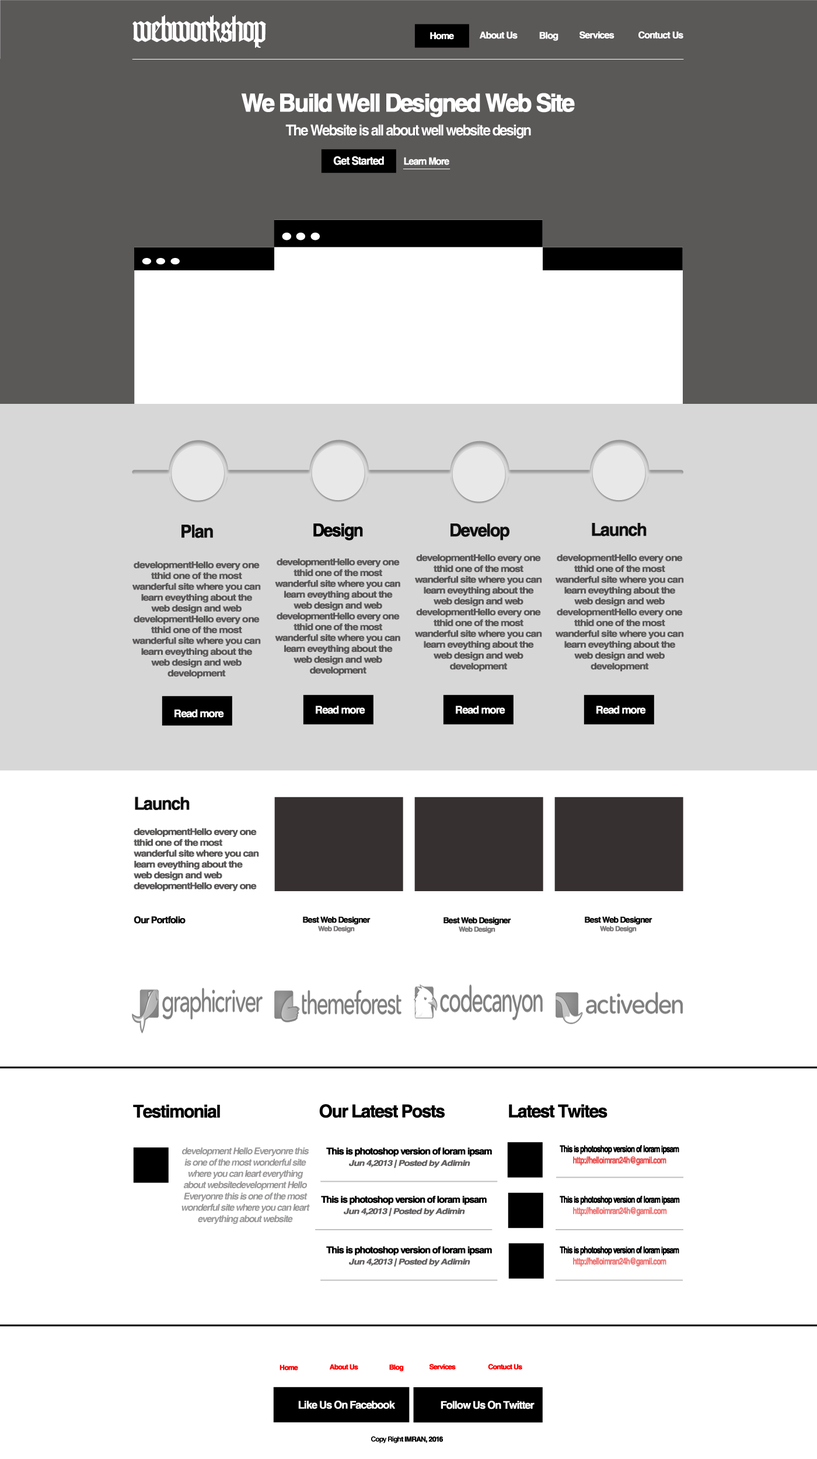
<style>
.page{position:relative;width:817px;height:1459px;background:#ffffff}
.page>*{position:absolute;margin:0}
.t1{font:35.3px "Lohengrin";letter-spacing:-0.08em;color:#ffffff;font-weight:bold}
.t2{font:9.4px "Helvetica-Bold";letter-spacing:-0.08em;color:#ffffff;font-weight:bold}
.t3{font:24.9px "Helvetica-Bold";letter-spacing:-0.08em;color:#ffffff;font-weight:bold;scale:0.94 1}
.t4{font:15px "Helvetica-Bold";letter-spacing:-0.08em;color:#ffffff;scale:0.94 1}
.t5{font:11.2px "Helvetica-Bold";letter-spacing:-0.08em;color:#ffffff;font-weight:bold;scale:0.94 1}
.t6{font:10px "Helvetica-Bold";letter-spacing:-0.08em;color:#ffffff;font-weight:bold;scale:0.94 1}
.t7{font:17.6px "Helvetica-Bold";letter-spacing:-0.08em;color:#111010;font-weight:bold}
.t8{font:17.6px "Helvetica-Bold";letter-spacing:-0.08em;color:#000000;font-weight:bold;scale:0.95 1}
.t9{font:17.6px "Helvetica-Bold";letter-spacing:-0.08em;color:#111010;font-weight:bold;scale:0.96 1}
.t10{font:9px "Helvetica-Bold";letter-spacing:-0.08em;color:#5b5858;font-weight:bold;scale:1.13 1}
.t11{font:9px "Helvetica-Bold";letter-spacing:-0.08em;color:#5b5858;font-weight:bold;scale:1.14 1}
.t12{font:9px "Helvetica-Bold";letter-spacing:-0.08em;color:#5b5858;font-weight:bold;scale:1.11 1}
.t13{font:10.6px "Helvetica-Bold";letter-spacing:-0.08em;color:#ffffff;font-weight:bold}
.t14{font:9.4px "Helvetica-Bold";letter-spacing:-0.08em;color:#111010;font-weight:bold}
.t15{font:8.2px "Helvetica-Bold";letter-spacing:-0.08em;color:#111010;font-weight:bold}
.t16{font:7.1px "Helvetica-Bold";letter-spacing:-0.08em;color:#7d7b7b;font-weight:bold}
.t17{font:17.6px "Helvetica-Bold";letter-spacing:-0.08em;color:#010101;font-weight:bold}
.t18{font:17.6px "Helvetica-Bold";letter-spacing:-0.08em;color:#000000;font-weight:bold}
.t19{font:9.4px "Helvetica-Bold";letter-spacing:-0.08em;color:#000000;font-weight:bold;scale:0.71 1}
.t20{font:9.4px "Helvetica-Bold";letter-spacing:-0.08em;color:#ea5656;font-weight:bold;scale:0.71 1}
.t21{font:9.4px "Helvetica-Bold";letter-spacing:-0.08em;color:#9a9898;font-style:italic}
.t22{font:9.4px "Helvetica-Bold";letter-spacing:-0.08em;color:#000000;font-weight:bold}
.t23{font:7.9px "Helvetica-Bold";letter-spacing:-0.08em;color:#636060;font-weight:bold;font-style:italic;scale:1.18 1}
.t24{font:9.4px "Helvetica-Bold";letter-spacing:-0.08em;color:#000000;font-weight:bold;scale:0.72 1}
.t25{font:9.4px "Helvetica-Bold";letter-spacing:-0.08em;color:#ef7b7b;font-weight:bold;scale:0.72 1}
.t26{font:9.4px "Helvetica-Bold";letter-spacing:-0.08em;color:#ee7a7a;font-weight:bold;scale:0.71 1}
.t27{font:7.1px "Helvetica-Bold";letter-spacing:-0.08em;color:#ff0000;font-weight:bold}
.t28{font:10.6px "Helvetica-Bold";letter-spacing:-0.08em;color:#fefefe;font-weight:bold}
.t29{font:10.6px "Helvetica-Bold";letter-spacing:-0.08em;color:#fffefe;font-weight:bold}
.t30{font:7.1px "Helvetica-Bold";letter-spacing:-0.08em;color:#010101;font-weight:bold}
.t31{font:7.1px "Helvetica-Bold";letter-spacing:-0.08em;color:#010101}
</style>
<div class="page">
<p class="t1" style="left:132px;top:15px;width:134px;height:33px">webworkshop</p>
<p class="t2" style="left:430px;top:32px;width:24px;height:8px">Home</p>
<p class="t2" style="left:479px;top:32px;width:39px;height:7px">About Us</p>
<p class="t2" style="left:539px;top:32px;width:20px;height:9px">Blog</p>
<p class="t2" style="left:580px;top:31px;width:35px;height:8px">Services</p>
<p class="t2" style="left:639px;top:31px;width:45px;height:8px">Contuct Us</p>
<p class="t3" style="left:241px;top:93px;width:334px;height:24px">We Build Well Designed Web Site</p>
<p class="t4" style="left:285px;top:124px;width:246px;height:15px">The Website is all about well website design</p>
<p class="t5" style="left:333px;top:156px;width:51px;height:9px">Get Started</p>
<p class="t6" style="left:404px;top:157px;width:45px;height:8px">Learn More</p>
<p class="t7" style="left:182px;top:525px;width:31px;height:13px">Plan</p>
<p class="t8" style="left:313px;top:523px;width:50px;height:17px">Design</p>
<p class="t9" style="left:451px;top:524px;width:59px;height:16px">Develop</p>
<p class="t7" style="left:592px;top:523px;width:55px;height:13px">Launch</p>
<p class="t10" style="left:415px;top:554px;width:127px;height:118px;text-align:center">developmentHello every one tthid one of the most wanderful site where you can learn eveything about the web design and web developmentHello every one tthid one of the most wanderful site where you can learn eveything about the web design and web development</p>
<p class="t11" style="left:555px;top:554px;width:129px;height:118px;text-align:center">developmentHello every one tthid one of the most wanderful site where you can learn eveything about the web design and web developmentHello every one tthid one of the most wanderful site where you can learn eveything about the web design and web development</p>
<p class="t11" style="left:132px;top:562px;width:129px;height:117px;text-align:center">developmentHello every one tthid one of the most wanderful site where you can learn eveything about the web design and web developmentHello every one tthid one of the most wanderful site where you can learn eveything about the web design and web development</p>
<p class="t12" style="left:275px;top:559px;width:125px;height:117px;text-align:center">developmentHello every one tthid one of the most wanderful site where you can learn eveything about the web design and web developmentHello every one tthid one of the most wanderful site where you can learn eveything about the web design and web development</p>
<p class="t13" style="left:175px;top:709px;width:49px;height:9px">Read more</p>
<p class="t13" style="left:316px;top:706px;width:49px;height:8px">Read more</p>
<p class="t13" style="left:456px;top:706px;width:49px;height:8px">Read more</p>
<p class="t13" style="left:597px;top:706px;width:49px;height:8px">Read more</p>
<p class="t7" style="left:135px;top:797px;width:55px;height:13px">Launch</p>
<p class="t12" style="left:134px;top:828px;width:125px;height:63px;text-align:center">developmentHello every one tthid one of the most wanderful site where you can learn eveything about the web design and web developmentHello every one</p>
<p class="t14" style="left:134px;top:916px;width:52px;height:8px">Our Portfolio</p>
<p class="t15" style="left:303px;top:916px;width:68px;height:17px;text-align:center">Best Web Designer<br><span class="t16">Web Design</span></p>
<p class="t15" style="left:444px;top:917px;width:67px;height:16px;text-align:center">Best Web Designer<br><span class="t16">Web Design</span></p>
<p class="t15" style="left:585px;top:916px;width:68px;height:17px;text-align:center">Best Web Designer<br><span class="t16">Web Design</span></p>
<p class="t17" style="left:133px;top:1104px;width:87px;height:14px">Testimonial</p>
<p class="t18" style="left:319px;top:1104px;width:126px;height:14px">Our Latest Posts</p>
<p class="t18" style="left:509px;top:1104px;width:99px;height:14px">Latest Twites</p>
<p class="t19" style="left:560px;top:1145px;width:119px;height:21px;text-align:center">This is photoshop version of loram ipsam<br><span class="t20">http://helloimran24h@gamil.com</span></p>
<p class="t21" style="left:182px;top:1148px;width:128px;height:77px;text-align:center">development Hello Everyonre this is one of the most wonderful site where you can leart everything about websitedevelopment Hello Everyonre this is one of the most wonderful site where you can leart everything about website</p>
<p class="t22" style="left:326px;top:1148px;width:166px;height:21px;text-align:center">This is photoshop version of loram ipsam<br><span class="t23">Jun 4,2013 | Posted by Adimin</span></p>
<p class="t22" style="left:321px;top:1196px;width:166px;height:20px;text-align:center">This is photoshop version of loram ipsam<br><span class="t23">Jun 4,2013 | Posted by Adimin</span></p>
<p class="t24" style="left:560px;top:1196px;width:120px;height:20px;text-align:center">This is photoshop version of loram ipsam<br><span class="t25">http://helloimran24h@gamil.com</span></p>
<p class="t22" style="left:326px;top:1246px;width:166px;height:21px;text-align:center">This is photoshop version of loram ipsam<br><span class="t23">Jun 4,2013 | Posted by Adimin</span></p>
<p class="t19" style="left:560px;top:1246px;width:119px;height:21px;text-align:center">This is photoshop version of loram ipsam<br><span class="t26">http://helloimran24h@gamil.com</span></p>
<p class="t27" style="left:280px;top:1365px;width:18px;height:6px">Home</p>
<p class="t27" style="left:329px;top:1364px;width:29px;height:6px">About Us</p>
<p class="t27" style="left:389px;top:1365px;width:15px;height:7px">Blog</p>
<p class="t27" style="left:429px;top:1364px;width:27px;height:6px">Services</p>
<p class="t27" style="left:488px;top:1364px;width:34px;height:6px">Contuct Us</p>
<p class="t28" style="left:298px;top:1401px;width:97px;height:8px">Like Us On Facebook</p>
<p class="t29" style="left:441px;top:1401px;width:94px;height:9px">Follow Us On Twitter</p>
<p class="t30" style="left:371px;top:1436px;width:72px;height:7px"><span class="t31">Copy Righ</span>t IMRAN, 2016</p>
</div>
